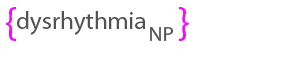
<style>
.page{position:relative;width:300px;height:60px;background:#ffffff}
.page>*{position:absolute;margin:0}
.t1{font:41.7px "MyriadPro-Regular";color:#f30df6}
.t2{font:25px "MyriadPro-Regular";color:#525252}
.t3{font:20.8px "MyriadPro-Regular";color:#525252}
</style>
<div class="page">
<p class="t1" style="left:6px;top:7px;width:10px;height:34px">{</p>
<p class="t2" style="left:17px;top:11px;width:129px;height:24px">dysrhythmia</p>
<p class="t1" style="left:179px;top:7px;width:10px;height:34px">}</p>
<p class="t3" style="left:150px;top:27px;width:24px;height:14px">NP</p>
</div>
